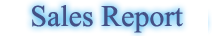
<style>
.page{position:relative;width:212px;height:36px;background:#ffffff}
.page>*{position:absolute;margin:0}
.t1{font:30px "TimesNewRomanPSMT";color:#445186}
.t2{font:27px "TimesNewRomanPSMT";color:#445186}
</style>
<div class="page">
<p class="t1" style="left:32px;top:5px;width:151px;height:28px"><span class="t2">   </span>Sales Report</p>
</div>
